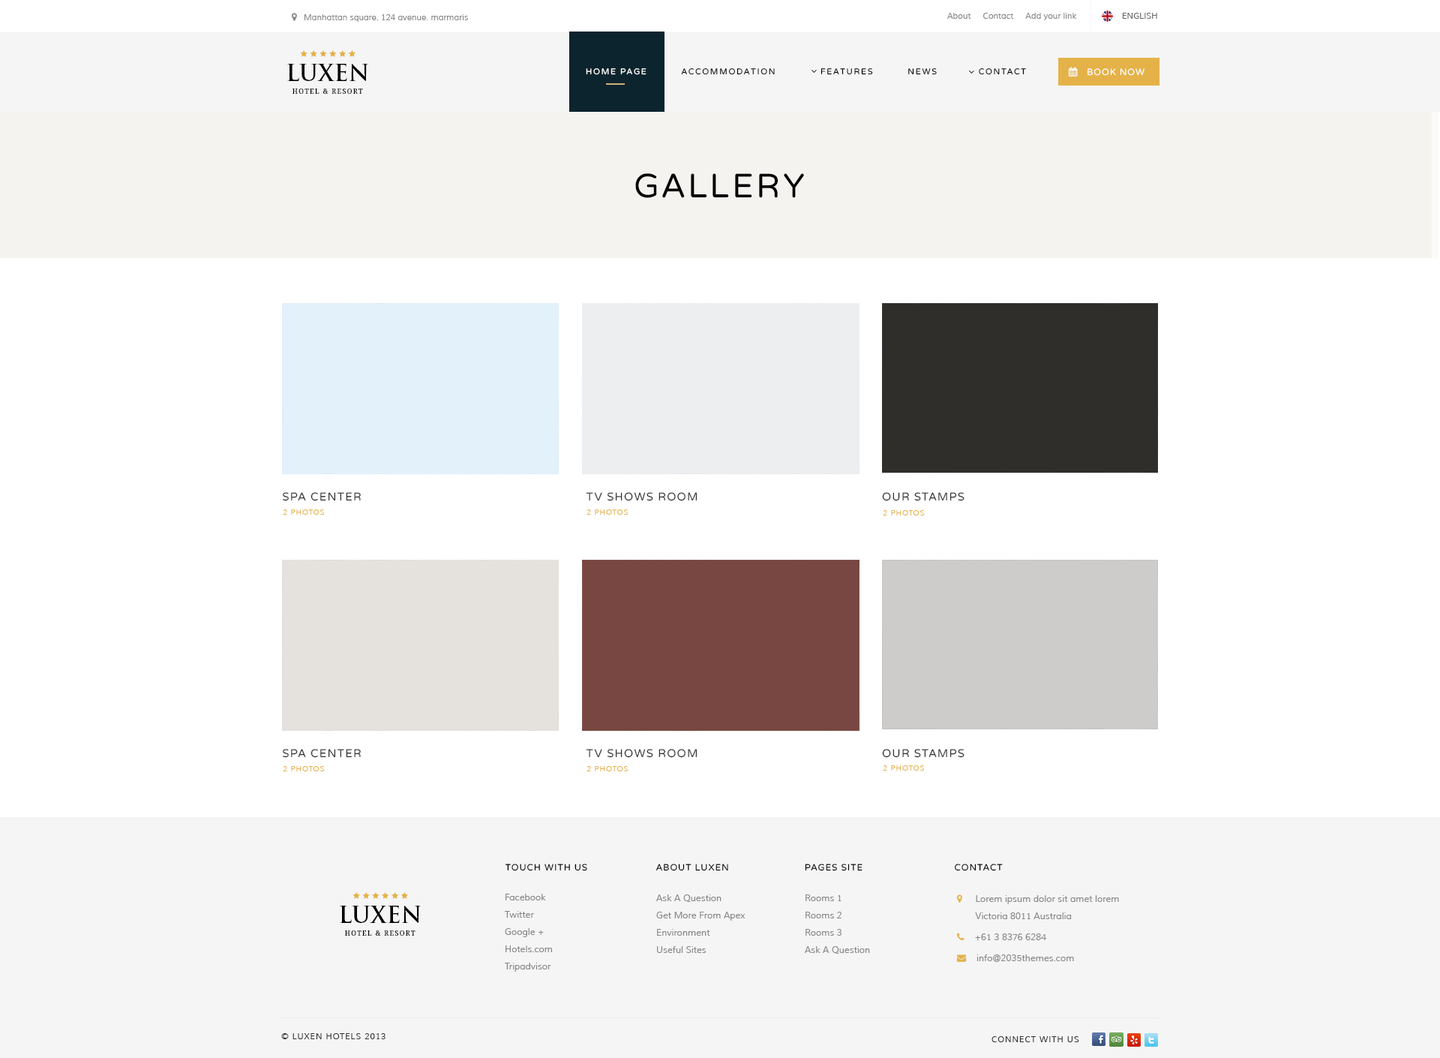
<style>
.page{position:relative;width:1440px;height:1058px;background:#ffffff}
.page>*{position:absolute;margin:0}
.t1{font:8.2px "Muli";color:#888888}
.t2{font:8.2px "Muli";color:#666666}
.t3{font:22.5px "TrajanPro-Bold";color:#000000;text-transform:uppercase}
.t4{font:8.2px "VarelaRound-Regular";letter-spacing:0.15em;color:#000000;text-transform:uppercase}
.t5{font:9px "VarelaRound-Regular";letter-spacing:0.08em;color:#ffffff;text-transform:uppercase}
.t6{font:6.8px "DroidSerif";letter-spacing:0.15em;color:#000000;text-transform:uppercase}
.t7{font:33.8px "VarelaRound-Regular";letter-spacing:0.08em;color:#000000;text-transform:uppercase}
.t8{font:11.3px "VarelaRound-Regular";letter-spacing:0.08em;color:#333333;text-transform:uppercase}
.t9{font:7.5px "Muli";letter-spacing:0.08em;color:#e4b248;text-transform:uppercase}
.t10{font:9px "VarelaRound-Regular";letter-spacing:0.08em;color:#000000;text-transform:uppercase}
.t11{font:9px/17.2px "Muli";color:#888888}
.t12{font:8.2px "Muli";letter-spacing:0.08em;color:#333333;text-transform:uppercase}
</style>
<div class="page">
<p class="t1" style="left:304px;top:14px;width:164px;height:8px">Manhattan square. 124 avenue. marmaris</p>
<p class="t1" style="left:946px;top:13px;width:131px;height:7px">About     Contact     Add your link</p>
<p class="t2" style="left:1122px;top:13px;width:35px;height:6px">ENGLISH</p>
<p class="t3" style="left:287px;top:64px;width:81px;height:17px">Luxen</p>
<p class="t4" style="left:586px;top:68px;width:440px;height:7px">HOME PAGE          ACCOMMODATION             FEATUREs          NEWS            CONTACT</p>
<p class="t5" style="left:1088px;top:68px;width:56px;height:8px">book now</p>
<p class="t6" style="left:292px;top:88px;width:71px;height:6px">Hotel &amp; Resort</p>
<p class="t7" style="left:635px;top:173px;width:169px;height:25px">gallery</p>
<p class="t8" style="left:283px;top:492px;width:78px;height:9px">Spa Center</p>
<p class="t8" style="left:586px;top:492px;width:112px;height:9px">Tv shows room</p>
<p class="t8" style="left:882px;top:492px;width:82px;height:9px">our stamps</p>
<p class="t9" style="left:283px;top:509px;width:42px;height:5px">2 Photos</p>
<p class="t9" style="left:586px;top:509px;width:42px;height:5px">2 Photos</p>
<p class="t9" style="left:883px;top:510px;width:42px;height:5px">2 Photos</p>
<p class="t8" style="left:283px;top:748px;width:78px;height:10px">Spa Center</p>
<p class="t8" style="left:586px;top:748px;width:112px;height:10px">Tv shows room</p>
<p class="t8" style="left:882px;top:748px;width:82px;height:10px">our stamps</p>
<p class="t9" style="left:283px;top:766px;width:42px;height:5px">2 Photos</p>
<p class="t9" style="left:586px;top:766px;width:42px;height:5px">2 Photos</p>
<p class="t9" style="left:883px;top:765px;width:42px;height:5px">2 Photos</p>
<p class="t10" style="left:505px;top:863px;width:82px;height:8px">touch with us</p>
<p class="t10" style="left:656px;top:863px;width:72px;height:8px">About Luxen</p>
<p class="t10" style="left:805px;top:863px;width:57px;height:8px">Pages site</p>
<p class="t10" style="left:955px;top:863px;width:48px;height:8px">Contact</p>
<p class="t11" style="left:505px;top:893px;width:48px;height:78px">Facebook<br>Twitter<br>Google +<br>Hotels.com<br>Tripadvisor</p>
<p class="t11" style="left:656px;top:894px;width:90px;height:58px">Ask A Question<br>Get More From Apex<br>Environment<br>Useful Sites</p>
<p class="t11" style="left:805px;top:894px;width:65px;height:59px">Rooms 1<br>Rooms 2<br>Rooms 3<br>Ask A Question<br>Get More From Apex<br>Environment<br>Useful Sites</p>
<p class="t3" style="left:340px;top:905px;width:81px;height:17px">Luxen</p>
<p class="t6" style="left:345px;top:930px;width:71px;height:5px">Hotel &amp; Resort</p>
<p class="t12" style="left:281px;top:1033px;width:105px;height:6px">© Luxen Hotels 2013</p>
<p class="t12" style="left:992px;top:1036px;width:87px;height:6px">Connect with us</p>
</div>
